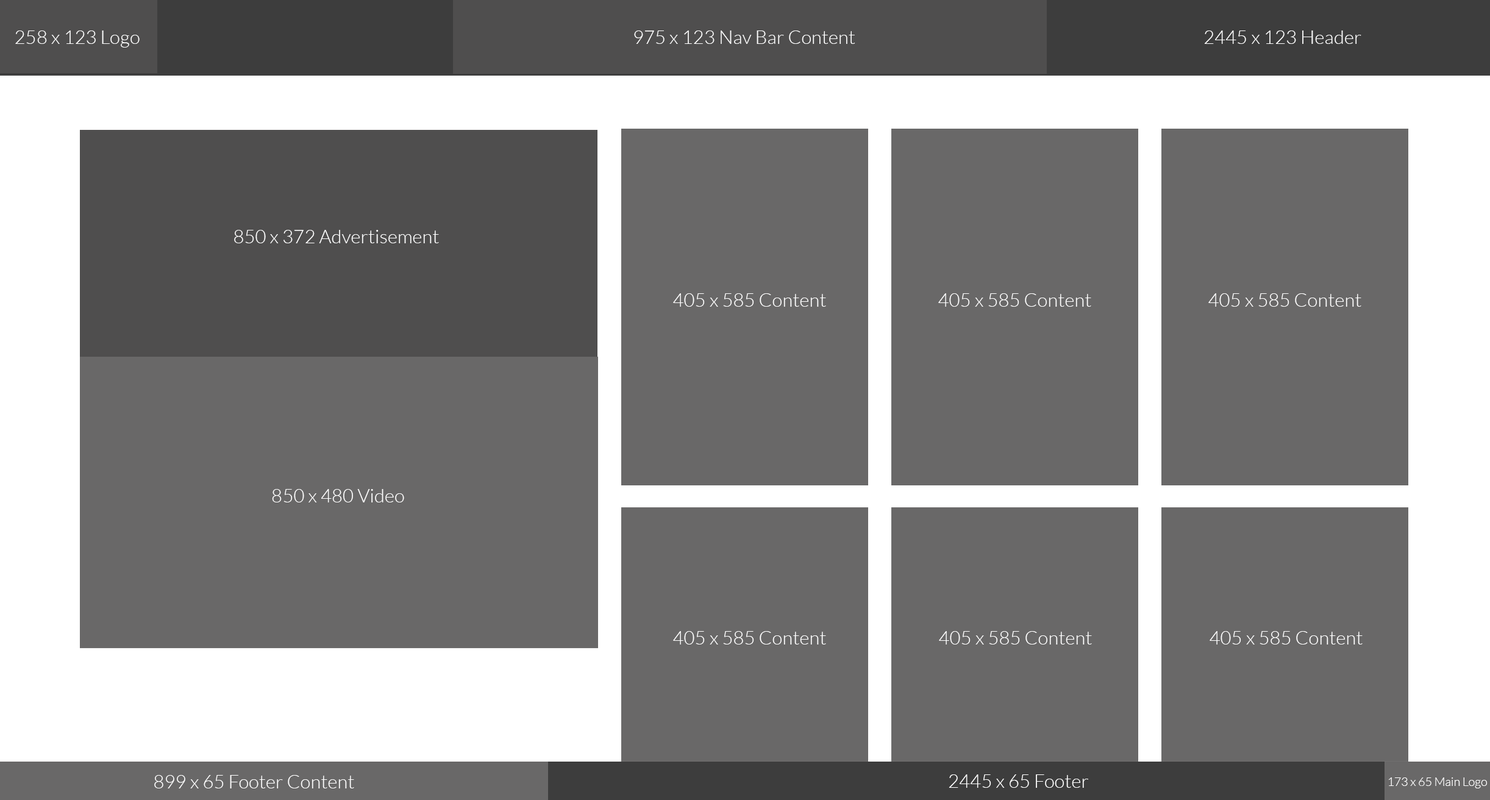
<style>
.page{position:relative;width:1490px;height:800px;background:#696868}
.page>*{position:absolute;margin:0}
.t1{font:19px "Lato-Light";color:#ffffff}
.t2{font:11.9px "Lato-Light";color:#ffffff}
</style>
<div class="page">
<p class="t1" style="left:15px;top:30px;width:125px;height:18px">258 x 123 Logo</p>
<p class="t1" style="left:634px;top:30px;width:222px;height:14px">975 x 123 Nav Bar Content</p>
<p class="t1" style="left:1204px;top:30px;width:158px;height:14px">2445 x 123 Header</p>
<p class="t1" style="left:234px;top:230px;width:205px;height:13px">850 x 372 Advertisement</p>
<p class="t1" style="left:673px;top:293px;width:153px;height:14px">405 x 585 Content</p>
<p class="t1" style="left:939px;top:293px;width:153px;height:14px">405 x 585 Content</p>
<p class="t1" style="left:1209px;top:293px;width:153px;height:14px">405 x 585 Content</p>
<p class="t1" style="left:272px;top:489px;width:132px;height:13px">850 x 480 Video</p>
<p class="t1" style="left:673px;top:631px;width:153px;height:14px">405 x 585 Content</p>
<p class="t1" style="left:939px;top:631px;width:153px;height:14px">405 x 585 Content</p>
<p class="t1" style="left:1210px;top:631px;width:153px;height:14px">405 x 585 Content</p>
<p class="t1" style="left:154px;top:775px;width:200px;height:13px">899 x 65 Footer Content</p>
<p class="t1" style="left:949px;top:774px;width:140px;height:14px">2445 x 65 Footer</p>
<p class="t2" style="left:1389px;top:778px;width:99px;height:10px">173 x 65 Main Logo</p>
</div>
